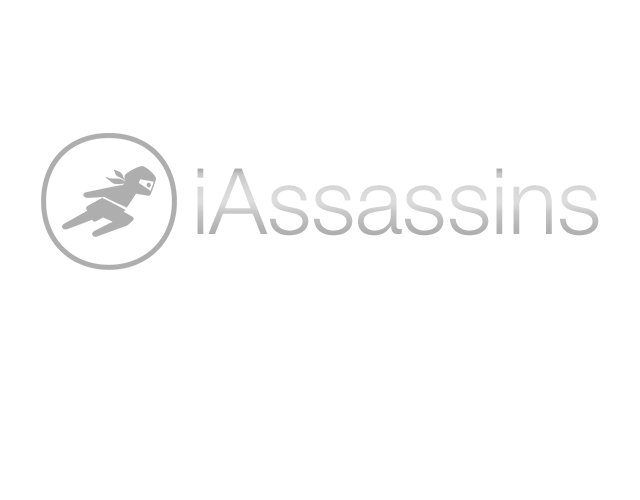
<style>
.page{position:relative;width:640px;height:500px;background:#ffffff}
.page>*{position:absolute;margin:0}
.t1{font:91.7px "HelveticaNeue-Light";color:#cccccc}
</style>
<div class="page">
<p class="t1" style="left:197px;top:168px;width:402px;height:68px">iAssassins</p>
</div>
